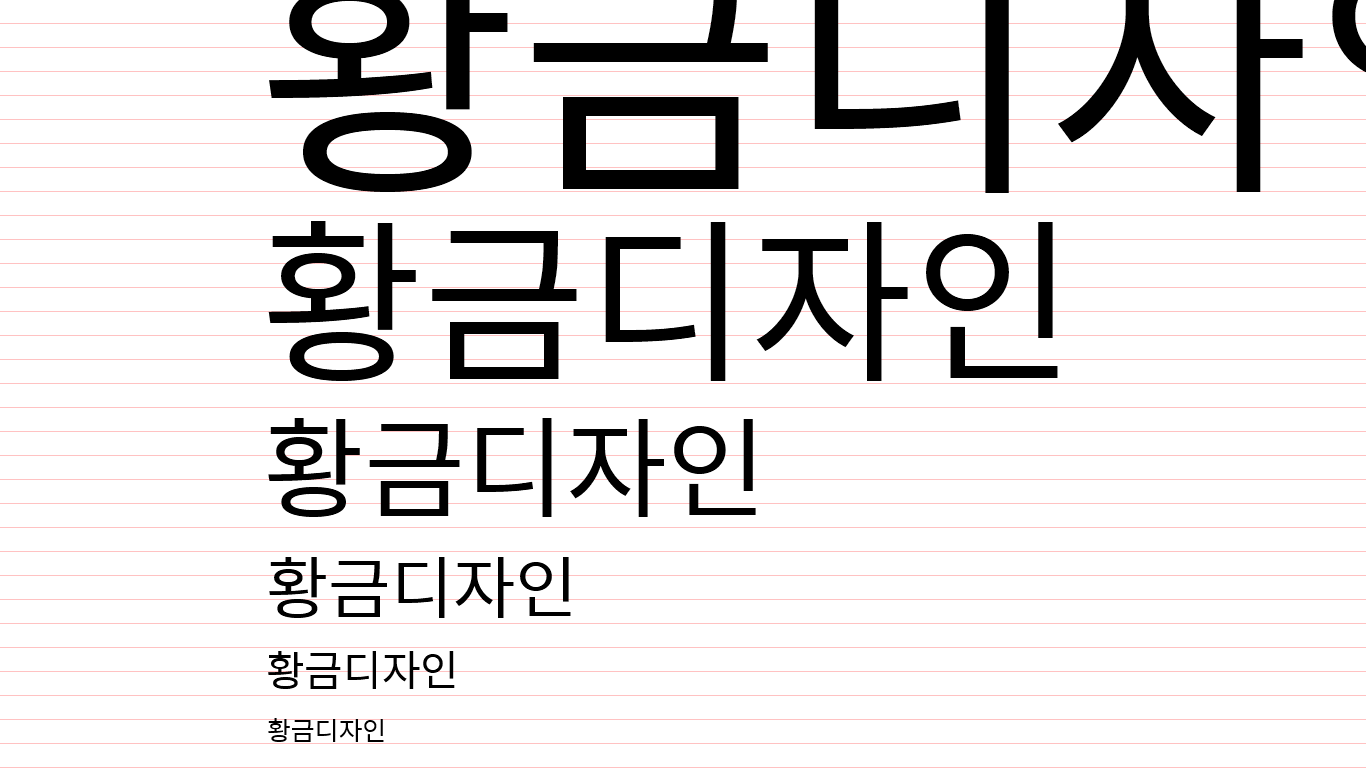
<style>
.page{position:relative;width:1366px;height:768px;background:#ffffff}
.page>*{position:absolute;margin:0}
.t1{font:177.4px "SpoqaHanSans-Regular";color:#000000}
.t2{font:109.7px "SpoqaHanSans-Regular";color:#000000}
.t3{font:67.8px "SpoqaHanSans-Regular";color:#000000}
.t4{font:41.9px "SpoqaHanSans-Regular";color:#000000}
.t5{font:25.9px "SpoqaHanSans-Regular";color:#000000}
</style>
<div class="page">
<p class="t1" style="left:268px;top:221px;width:790px;height:160px">황금디자인</p>
<p class="t2" style="left:268px;top:418px;width:488px;height:99px">황금디자인</p>
<p class="t3" style="left:269px;top:557px;width:302px;height:61px">황금디자인</p>
<p class="t4" style="left:268px;top:651px;width:187px;height:38px">황금디자인</p>
<p class="t5" style="left:268px;top:718px;width:116px;height:24px">황금디자인</p>
</div>
